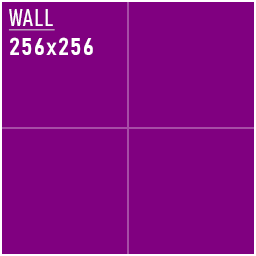
<style>
.page{position:relative;width:256px;height:256px;background:#800080}
.page>*{position:absolute;margin:0}
.t1{font:24px "Bahnschrift-SemiBoldSemiCondensed";letter-spacing:0.05em;color:#ffffff}
.t2{font:24px "Bahnschrift-SemiLightCondensed";letter-spacing:0.05em;color:#ffffff;text-decoration:underline}
</style>
<div class="page">
<p class="t1" style="left:8px;top:9px;width:85px;height:46px"><span class="t2">WALL<br></span>256x256</p>
</div>
